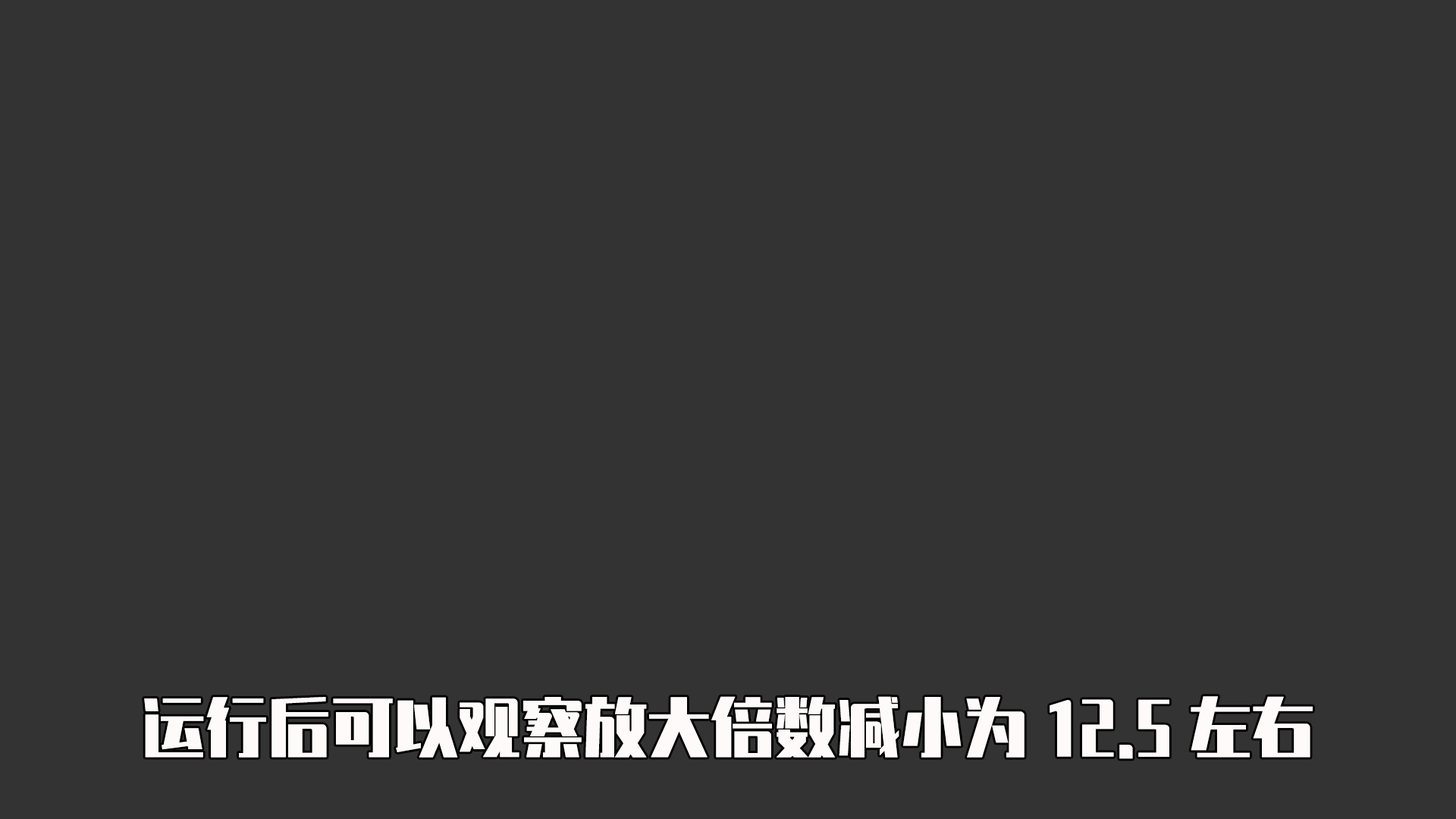
<style>
.page{position:relative;width:1456px;height:819px;background:#333333}
.page>*{position:absolute;margin:0}
.t1{font:63.2px "ZhenyanGB-Regular";color:#fefafa}
</style>
<div class="page">
<p class="t1" style="left:144px;top:696px;width:1169px;height:63px">运行后可以观察放大倍数减小为12.5左右</p>
</div>
